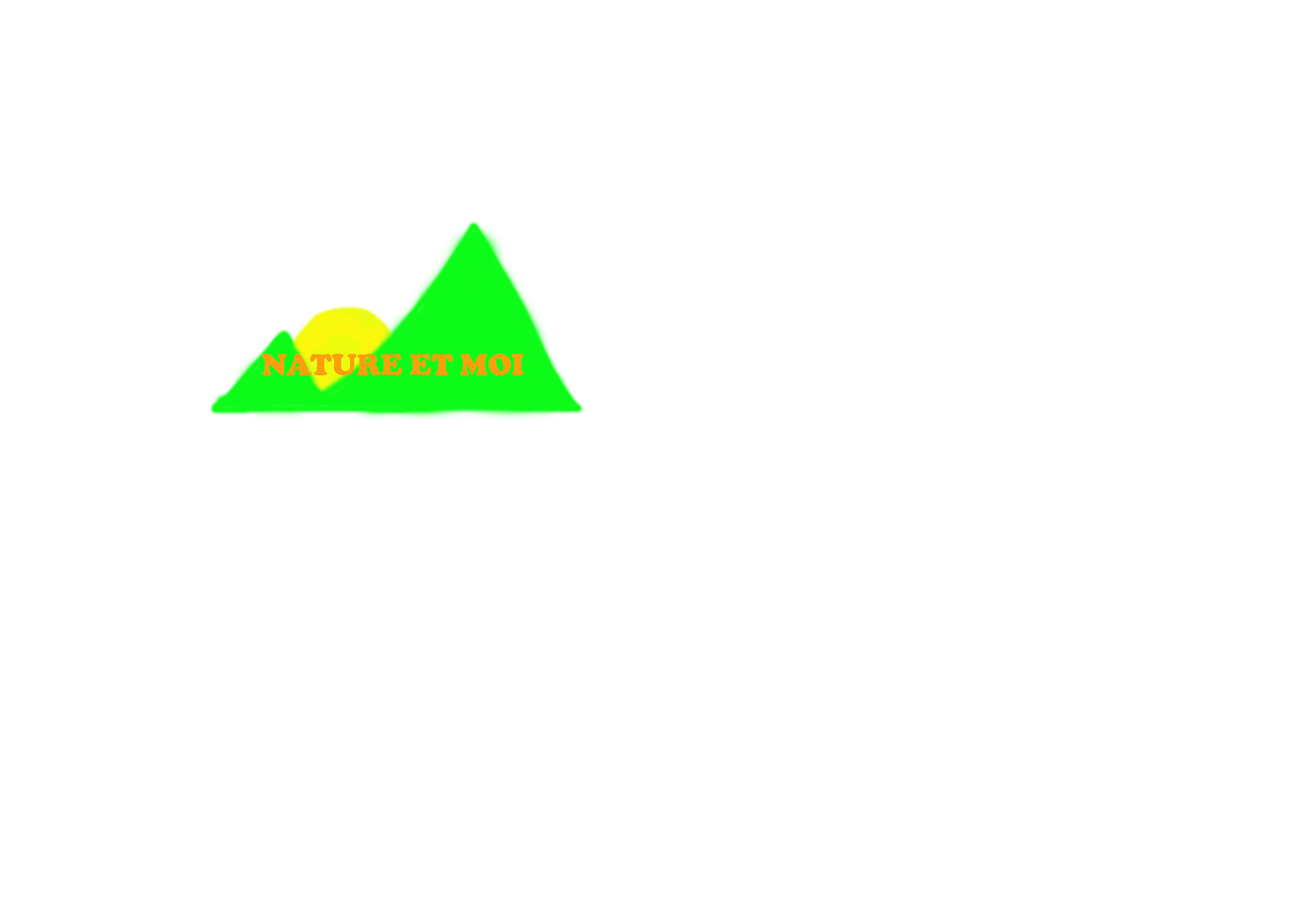
<style>
.page{position:relative;width:1292px;height:923px;background:#ffffff}
.page>*{position:absolute;margin:0}
.t1{font:30.8px "CooperBlack";color:#fb9f0d}
</style>
<div class="page">
<p class="t1" style="left:261px;top:354px;width:263px;height:21px">NATURE ET MOI</p>
</div>
